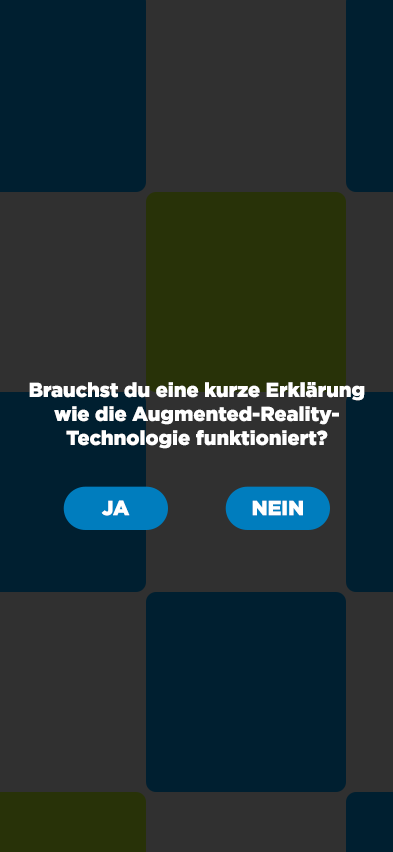
<style>
.page{position:relative;width:393px;height:852px;background:#303030}
.page>*{position:absolute;margin:0}
.t1{font:20px "Gotham-Black";color:#ffffff}
.t2{font:20.5px "Gotham-Black";color:#ffffff}
</style>
<div class="page">
<p class="t1" style="left:29px;top:382px;width:336px;height:67px;text-align:center">Brauchst du eine kurze Erklärung<br>wie die Augmented-Reality-<br>Technologie funktioniert?</p>
<p class="t2" style="left:101px;top:500px;width:29px;height:16px">JA</p>
<p class="t2" style="left:252px;top:500px;width:51px;height:16px">NEIN</p>
</div>
